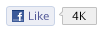
<style>
.page{position:relative;width:103px;height:32px;background:#ffffff}
.page>*{position:absolute;margin:0}
.t1{font:11px "LucidaGrande";letter-spacing:0.01em;color:#535998}
.t2{font:11px "LucidaGrande";color:#000000}
</style>
<div class="page">
<p class="t1" style="left:29px;top:11px;width:20px;height:9px">Like</p>
<p class="t2" style="left:72px;top:11px;width:14px;height:9px">4K</p>
</div>
